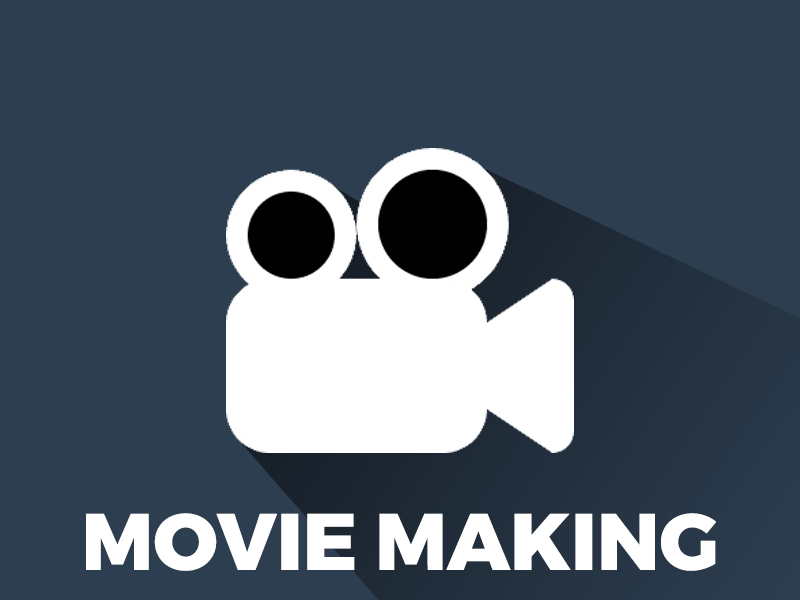
<style>
.page{position:relative;width:800px;height:600px;background:#2d3e50}
.page>*{position:absolute;margin:0}
.t1{font:80px "Montserrat-ExtraBold";color:#ffffff}
</style>
<div class="page">
<p class="t1" style="left:86px;top:513px;width:630px;height:58px">MOVIE MAKING</p>
</div>
